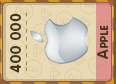
<style>
.page{position:relative;width:116px;height:84px;background:#eadab4}
.page>*{position:absolute;margin:0}
.t1{font:15px "RotondaC-Bold";letter-spacing:0.04em;color:#43341d;text-transform:uppercase}
.t2{font:15px "RotondaC-Bold";letter-spacing:0.04em;color:#43341d;font-variant:small-caps}
</style>
<div class="page">
<p class="t1" style="left:10px;top:13px;width:11px;height:60px;rotate:-90deg">400 000</p>
<p class="t2" style="left:97px;top:25px;width:11px;height:34px;rotate:-90deg">Apple</p>
</div>
